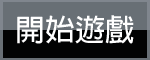
<style>
.page{position:relative;width:150px;height:60px;background:#686f75}
.page>*{position:absolute;margin:0}
.t1{font:30px "AdobeFanHeitiStd-Bold";color:#ffffff}
</style>
<div class="page">
<p class="t1" style="left:17px;top:15px;width:117px;height:29px">開始遊戲</p>
</div>
